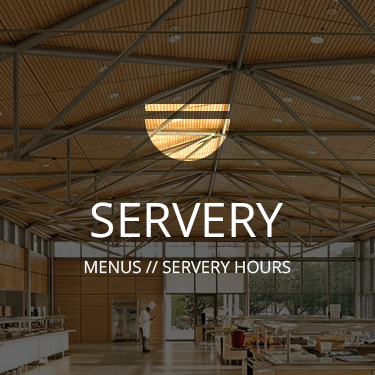
<style>
.page{position:relative;width:375px;height:375px}
.page>*{position:absolute;margin:0}
.t1{font:47.9px "OpenSans";color:#ffffff}
.t2{font:16.7px "OpenSans";color:#ffffff}
</style>
<div class="page">
<p class="t1" style="left:91px;top:202px;width:192px;height:36px">SERVERY</p>
<p class="t2" style="left:84px;top:260px;width:207px;height:14px">MENUS // SERVERY HOURS</p>
</div>
